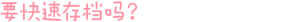
<style>
.page{position:relative;width:289px;height:22px;background:#ffffff}
.page>*{position:absolute;margin:0}
.t1{font:24px "¢è?";color:#ff93a5}
</style>
<div class="page">
<p class="t1" style="left:0px;top:1px;width:138px;height:21px">要快速存档吗？</p>
</div>
